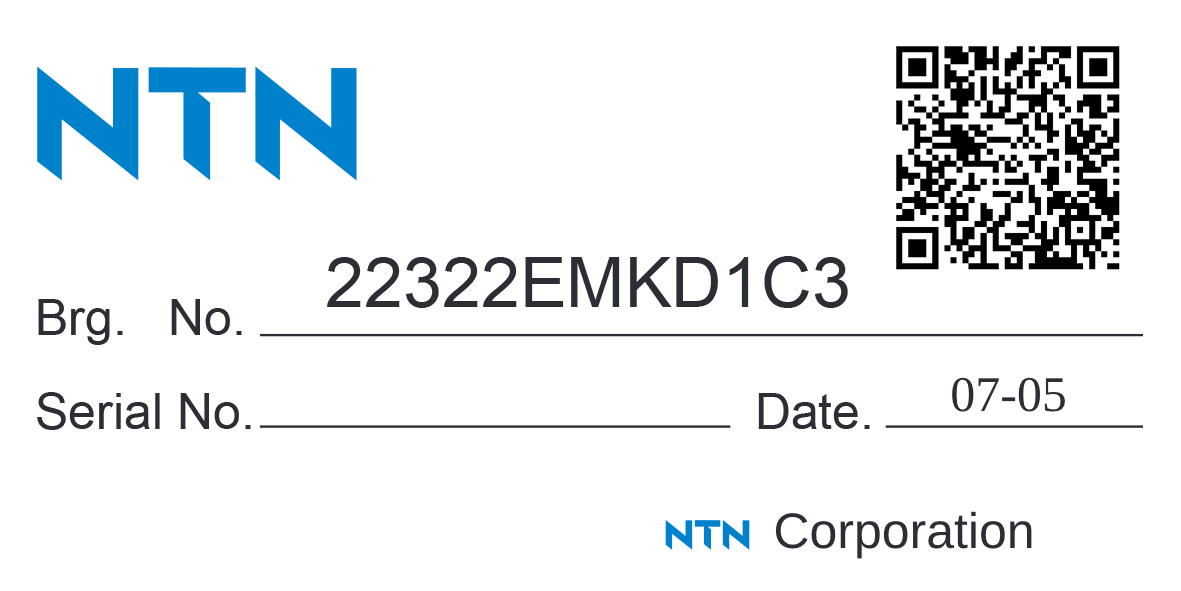
<style>
.page{position:relative;width:1181px;height:591px;background:#ffffff}
.page>*{position:absolute;margin:0}
.t1{font:70px "ArialMT";color:#2c2e35}
.t2{font:50px "ArialMT";color:#2c2e35}
.t3{font:50px "TimesNewRomanPSMT";color:#2c2e35}
</style>
<div class="page">
<p class="t1" style="left:327px;top:256px;width:521px;height:52px">22322EMKD1C3</p>
<p class="t2" style="left:37px;top:299px;width:833px;height:131px">Brg.   No.<br><br>Serial No.                                    Date.</p>
<p class="t3" style="left:952px;top:377px;width:113px;height:35px">07-05</p>
<p class="t2" style="left:775px;top:511px;width:257px;height:48px">Corporation</p>
</div>
